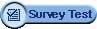
<style>
.page{position:relative;width:97px;height:29px;background:#82b3e7}
.page>*{position:absolute;margin:0}
.t1{font:11px "Gulim";letter-spacing:0.025em;color:#1d2f6a}
</style>
<div class="page">
<p class="t1" style="left:29px;top:10px;width:62px;height:10px">Survey Test</p>
<p class="t1" style="left:30px;top:10px;width:62px;height:10px">Survey Test</p>
</div>
